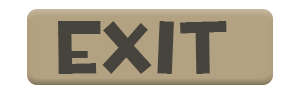
<style>
.page{position:relative;width:300px;height:100px;background:#ffffff}
.page>*{position:absolute;margin:0}
.t1{font:75px "TF2Build";color:#47443e}
</style>
<div class="page">
<p class="t1" style="left:58px;top:21px;width:169px;height:53px">exit</p>
</div>
